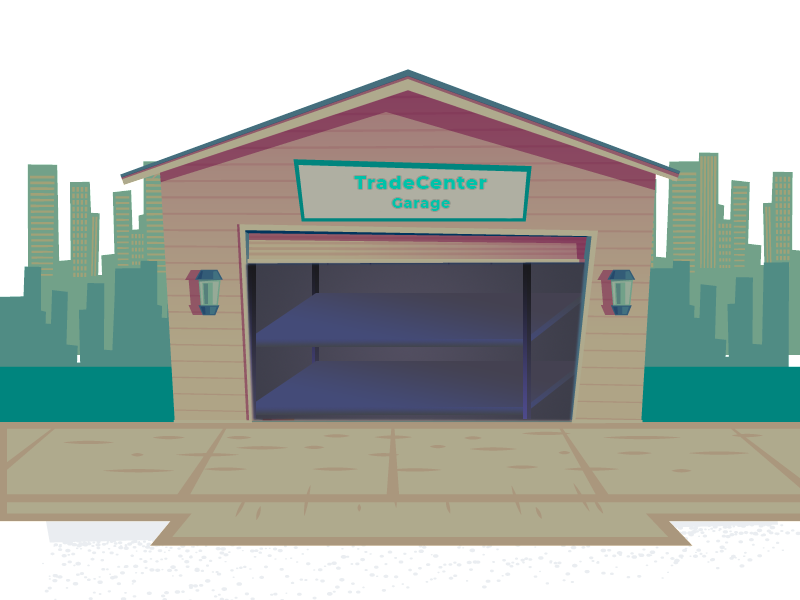
<style>
.page{position:relative;width:800px;height:600px;background:#ffffff}
.page>*{position:absolute;margin:0}
.t1{font:18.6px "Montserrat-ExtraBold";letter-spacing:0.05em;color:#00c2a9}
.t2{font:14.4px "Montserrat-ExtraBold";letter-spacing:0.05em;color:#00c2a9}
</style>
<div class="page">
<p class="t1" style="left:354px;top:176px;width:133px;height:13px">TradeCenter</p>
<p class="t2" style="left:392px;top:198px;width:58px;height:13px">Garage</p>
</div>
